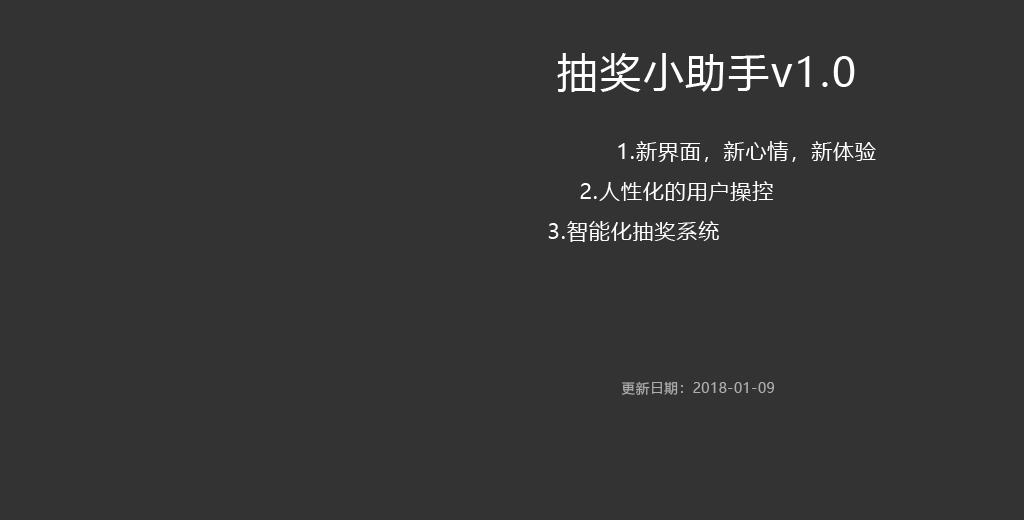
<style>
.page{position:relative;width:1024px;height:520px;background:#333333}
.page>*{position:absolute;margin:0}
.t1{font:40.5px "MicrosoftYaHeiUI";letter-spacing:0.055em;color:#ffffff}
.t2{font:20.8px "MicrosoftYaHeiUI";letter-spacing:0.055em;color:#ffffff}
.t3{font:13.5px "MicrosoftYaHeiUI";letter-spacing:0.055em;color:#aeaeae}
</style>
<div class="page">
<p class="t1" style="left:557px;top:53px;width:298px;height:39px">抽奖小助手v1.0</p>
<p class="t2" style="left:618px;top:141px;width:258px;height:21px">1.新界面，新心情，新体验</p>
<p class="t2" style="left:580px;top:181px;width:193px;height:20px">2.人性化的用户操控</p>
<p class="t2" style="left:548px;top:221px;width:171px;height:21px">3.智能化抽奖系统</p>
<p class="t3" style="left:621px;top:381px;width:153px;height:14px">更新日期：2018-01-09</p>
</div>
